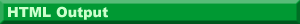
<style>
.page{position:relative;width:300px;height:24px;background:#009933}
.page>*{position:absolute;margin:0}
.t1{font:14px "Arial-Black";color:#ccffcc}
</style>
<div class="page">
<p class="t1" style="left:8px;top:6px;width:100px;height:14px">HTML Output</p>
</div>
